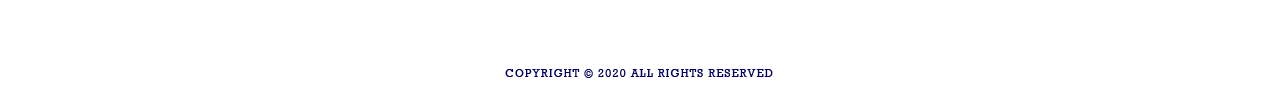
<style>
.page{position:relative;width:1280px;height:85px;background:#ffffff}
.page>*{position:absolute;margin:0}
.t1{font:11.1px "Rockwell";letter-spacing:0.11em;color:#000066;text-transform:uppercase}
</style>
<div class="page">
<p class="t1" style="left:505px;top:69px;width:268px;height:9px">copyright © 2020 All Rights Reserved</p>
</div>
